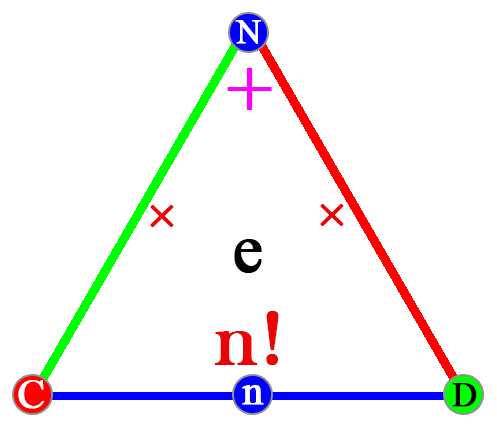
<style>
.page{position:relative;width:497px;height:424px;background:#ffffff}
.page>*{position:absolute;margin:0}
.t1{font:33.9px "TimesNewRomanPSMT";color:#ffffff;font-weight:bold}
.t2{font:79.6px "TimesNewRomanPSMT";color:#ff00ff;font-weight:bold}
.t3{font:54.2px "TimesNewRomanPSMT";letter-spacing:0.04em;color:#e90505;font-weight:bold}
.t4{font:66.7px "TimesNewRomanPSMT";color:#000000;font-weight:bold}
.t5{font:80.4px "BaskOldFace";letter-spacing:0.04em;color:#e90505;font-weight:bold}
.t6{font:41.3px "TimesNewRomanPSMT";color:#ffffff;font-weight:bold}
.t7{font:34.2px "TimesNewRomanPSMT";color:#000000;font-weight:bold}
</style>
<div class="page">
<p class="t1" style="left:235px;top:20px;width:27px;height:24px">N</p>
<p class="t2" style="left:227px;top:68px;width:45px;height:42px">+</p>
<p class="t3" style="left:150px;top:205px;width:24px;height:22px">×</p>
<p class="t3" style="left:320px;top:204px;width:24px;height:22px">×</p>
<p class="t4" style="left:234px;top:239px;width:28px;height:34px">e</p>
<p class="t5" style="left:214px;top:311px;width:65px;height:54px">n!</p>
<p class="t6" style="left:18px;top:380px;width:26px;height:29px">C</p>
<p class="t6" style="left:242px;top:385px;width:22px;height:20px">n</p>
<p class="t7" style="left:452px;top:383px;width:25px;height:24px">D</p>
</div>
